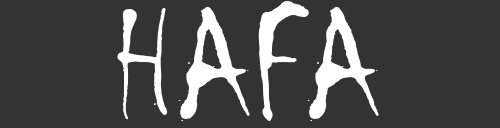
<style>
.page{position:relative;width:500px;height:128px;background:#333333}
.page>*{position:absolute;margin:0}
.t1{font:152.6px "Chiller-Regular";color:#ffffff}
</style>
<div class="page">
<p class="t1" style="left:117px;top:1px;width:262px;height:129px">HAFA</p>
</div>
